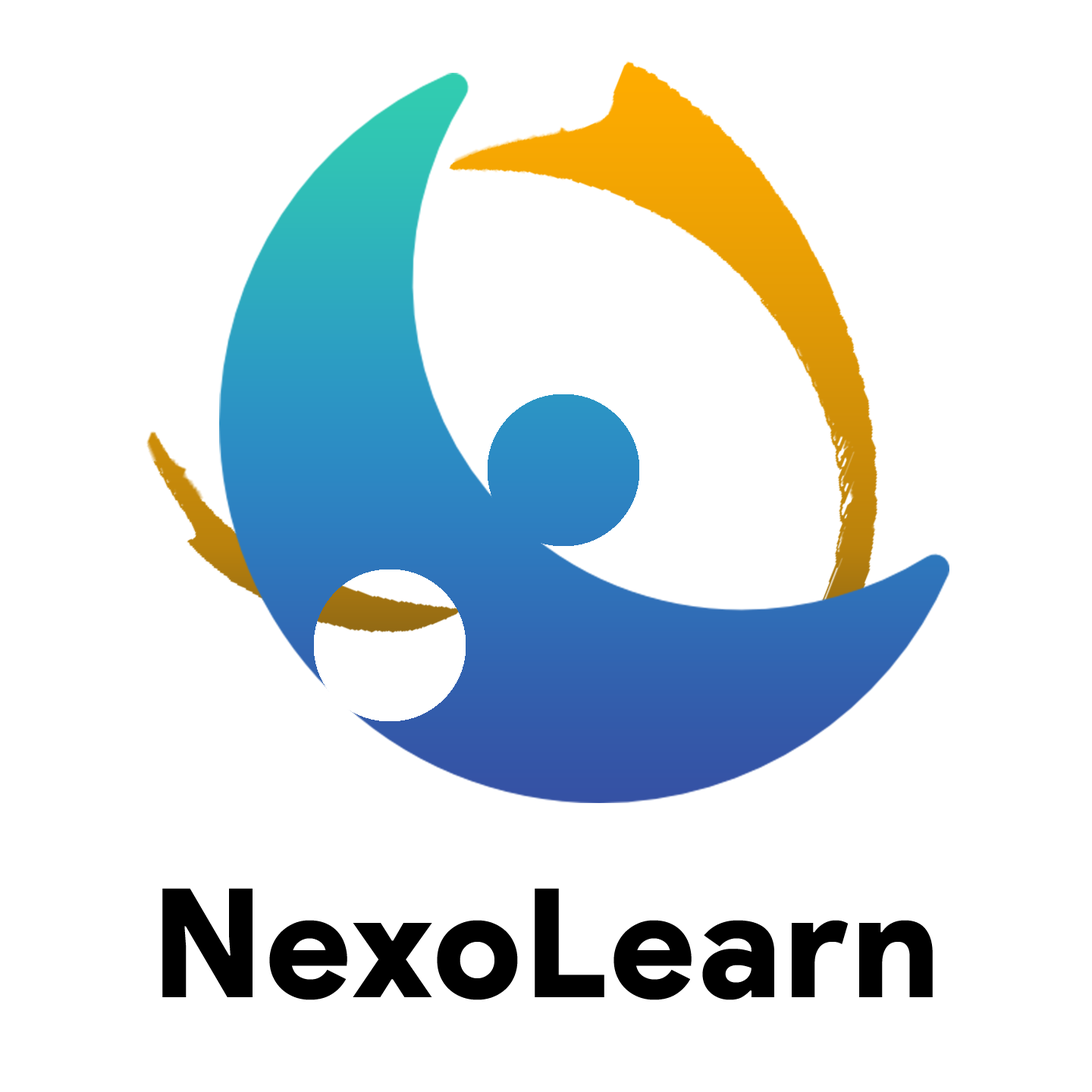
<style>
.page{position:relative;width:1092px;height:1092px;background:#ffffff}
.page>*{position:absolute;margin:0}
.t1{font:151.7px "ProductSans-Black";letter-spacing:0.014em;color:#000000}
</style>
<div class="page">
<p class="t1" style="left:162px;top:888px;width:771px;height:112px">NexoLearn</p>
</div>
